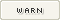
<style>
.page{position:relative;width:60px;height:20px;background:#f6f4ed}
.page>*{position:absolute;margin:0}
.t1{font:9px "Silkscreen";color:#383838}
</style>
<div class="page">
<p class="t1" style="left:17px;top:8px;width:25px;height:5px">warn</p>
</div>
